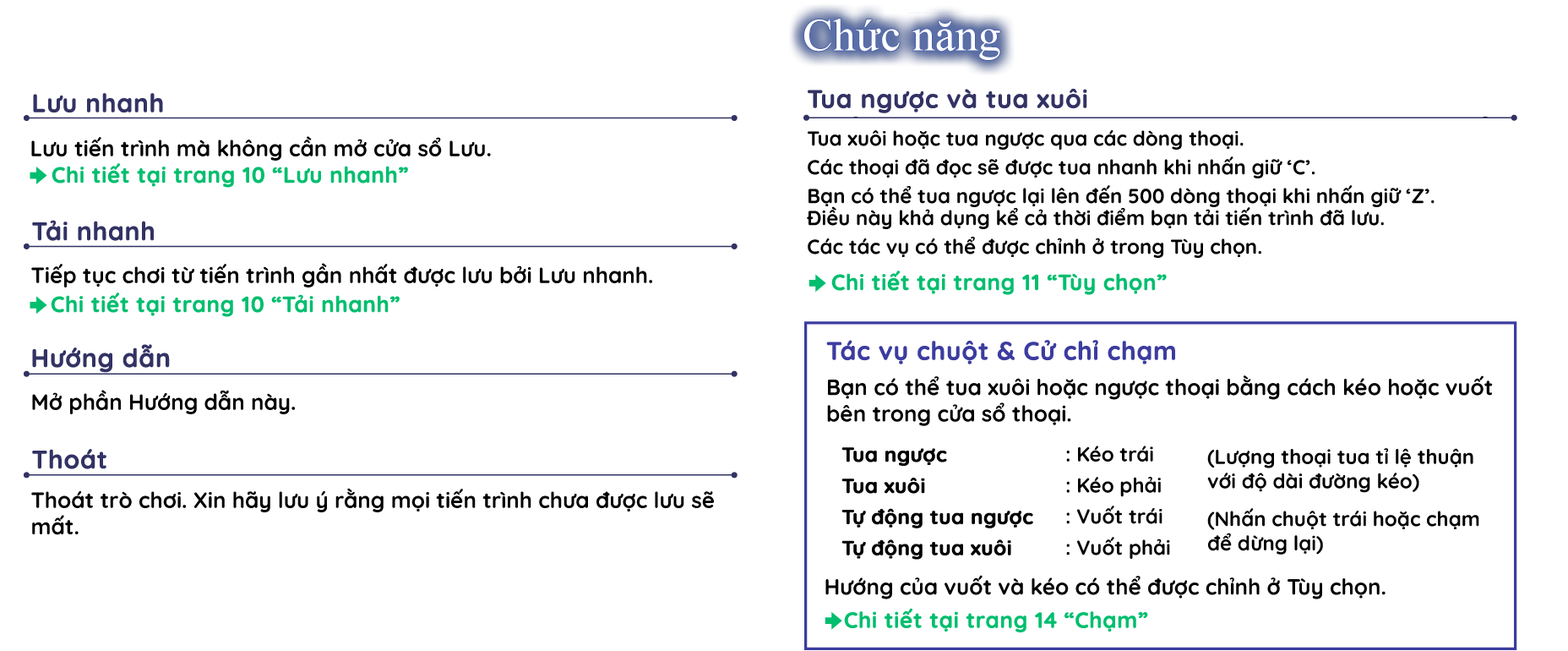
<style>
.page{position:relative;width:1568px;height:651px;background:#ffffff}
.page>*{position:absolute;margin:0}
.t1{font:45.6px "TimesNewRomanPSMT";color:#ffffff}
.t2{font:25.3px "Quicksand-Bold";color:#323264;font-weight:bold}
.t3{font:22px "Quicksand-Bold";color:#000000}
.t4{font:20.3px/22px "Quicksand-Bold";color:#000000}
.t5{font:22px "Quicksand-Bold";color:#00be6e;font-weight:bold}
.t6{font:25.3px "Quicksand-Bold";color:#3c3ca0;font-weight:bold}
.t7{font:22px "Quicksand-Bold";color:#010103}
.t8{font:20.3px "Quicksand-Bold";color:#010103;font-weight:bold}
.t9{font:20.3px "Quicksand-Bold";color:#010103}
.t10{font:22px/27px "Quicksand-Bold";color:#000000}
</style>
<div class="page">
<p class="t1" style="left:804px;top:19px;width:196px;height:41px">Chức năng</p>
<p class="t1" style="left:804px;top:19px;width:196px;height:41px">Chức năng</p>
<p class="t2" style="left:808px;top:89px;width:279px;height:24px">Tua ngược và tua xuôi</p>
<p class="t2" style="left:33px;top:93px;width:130px;height:20px">Lưu nhanh</p>
<p class="t3" style="left:31px;top:136px;width:460px;height:25px">Lưu tiến trình mà không cần mở cửa sổ Lưu.</p>
<p class="t4" style="left:807px;top:130px;width:628px;height:128px">Tua xuôi hoặc tua ngược qua các dòng thoại.<br>Các thoại đã đọc sẽ được tua nhanh khi nhấn giữ ‘C’.<br>Bạn có thể tua ngược lại lên đến 500 dòng thoại khi nhấn giữ ‘Z’. <br>Điều này khả dụng kể cả thời điểm bạn tải tiến trình đã lưu.<br>Các tác vụ có thể được chỉnh ở trong Tùy chọn.</p>
<p class="t5" style="left:52px;top:163px;width:356px;height:25px">Chi tiết tại trang 10 “Lưu nhanh”</p>
<p class="t2" style="left:32px;top:220px;width:122px;height:21px">Tải nhanh</p>
<p class="t3" style="left:31px;top:263px;width:621px;height:24px">Tiếp tục chơi từ tiến trình gần nhất được lưu bởi Lưu nhanh.</p>
<p class="t5" style="left:831px;top:270px;width:336px;height:25px">Chi tiết tại trang 11 “Tùy chọn”</p>
<p class="t5" style="left:51px;top:292px;width:349px;height:25px">Chi tiết tại trang 10 “Tải nhanh”</p>
<p class="t6" style="left:826px;top:340px;width:349px;height:24px">Tác vụ chuột &amp; Cử chỉ chạm</p>
<p class="t2" style="left:32px;top:344px;width:138px;height:29px">Hướng dẫn</p>
<p class="t7" style="left:827px;top:375px;width:666px;height:51px">Bạn có thể tua xuôi hoặc ngược thoại bằng cách kéo hoặc vuốt bên trong cửa sổ thoại.</p>
<p class="t3" style="left:32px;top:389px;width:263px;height:25px">Mở phần Hướng dẫn này.</p>
<p class="t2" style="left:32px;top:449px;width:74px;height:20px">Thoát</p>
<p class="t8" style="left:841px;top:447px;width:192px;height:112px">Tua ngược<br>Tua xuôi<br>Tự động tua ngược<br>Tự động tua xuôi</p>
<p class="t9" style="left:1066px;top:445px;width:104px;height:113px">: Kéo trái<br>: Kéo phải<br>: Vuốt trái<br>: Vuốt phải</p>
<p class="t9" style="left:1207px;top:448px;width:266px;height:45px">(Lượng thoại tua tỉ lệ thuận<br>với độ dài đường kéo)</p>
<p class="t3" style="left:31px;top:487px;width:683px;height:48px"><span class="t10">Thoát trò chơi. </span>Xin hãy lưu ý rằng mọi tiến trình chưa được lưu sẽ mất.</p>
<p class="t9" style="left:1207px;top:508px;width:272px;height:46px">(Nhấn chuột trái hoặc chạm để dừng lại)</p>
<p class="t3" style="left:825px;top:574px;width:561px;height:25px">Hướng của vuốt và kéo có thể được chỉnh ở Tùy chọn.</p>
<p class="t5" style="left:844px;top:607px;width:304px;height:25px">Chi tiết tại trang 14 “Chạm”</p>
</div>
